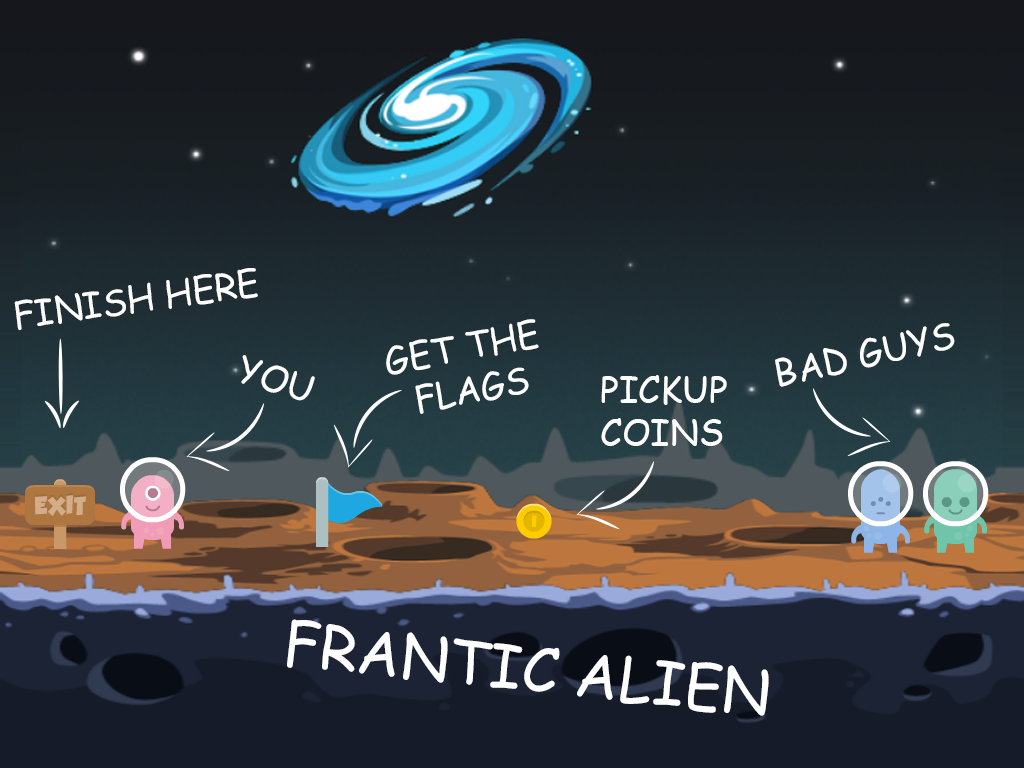
<style>
.page{position:relative;width:1024px;height:768px}
.page>*{position:absolute;margin:0}
.t1{font:36px "ComicSansMS";color:#ffffff}
.t2{font:60px "ComicSansMS";color:#ffffff}
</style>
<div class="page">
<p class="t1" style="left:14px;top:268px;width:244px;height:62px;rotate:-8deg">FINISH HERE</p>
<p class="t1" style="left:386px;top:319px;width:153px;height:95px;rotate:-11deg">GET THE<br>  FLAGS</p>
<p class="t1" style="left:775px;top:323px;width:180px;height:64px;rotate:-13deg">BAD GUYS</p>
<p class="t1" style="left:241px;top:355px;width:74px;height:46px;rotate:17deg">YOU</p>
<p class="t1" style="left:601px;top:375px;width:126px;height:71px">PICKUP<br>COINS</p>
<p class="t2" style="left:287px;top:619px;width:482px;height:97px;rotate:6deg">FRANTIC ALIEN</p>
</div>
